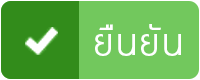
<style>
.page{position:relative;width:200px;height:80px;background:#72c85d}
.page>*{position:absolute;margin:0}
.t1{font:48px "ThaiSansLite";letter-spacing:0.03em;color:#ffffff}
</style>
<div class="page">
<p class="t1" style="left:95px;top:24px;width:86px;height:32px">ยืนยัน</p>
</div>
